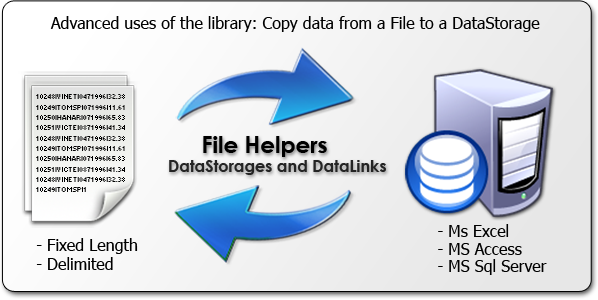
<style>
.page{position:relative;width:598px;height:300px}
.page>*{position:absolute;margin:0}
.t1{font:16.1px "Tahoma";color:#000000}
.t2{font:6.9px/10.3px "Small Fonts";color:#000000}
.t3{font:23px "CenturyGothic-Bold";color:#000000}
.t4{font:16.1px "CenturyGothic-Bold";color:#242424}
.t5{font:16.1px/17.2px "Tahoma";color:#000000}
</style>
<div class="page">
<p class="t1" style="left:50px;top:16px;width:490px;height:16px">Advanced uses of the library: Copy data from a File to a DataStorage</p>
<p class="t2" style="left:36px;top:94px;width:89px;height:98px">10248|VINET|0471996|32.38<br>10249|TOMSP|071996|11.61<br>10250|HANAR|071996|65.83<br>10251|VICTE|0871996|41.34<br>10248|VINET|0471996|32.38<br>10249|TOMSP|071996|11.61<br>10250|HANAR|071996|65.83<br>10251|VICTE|0871996|41.34<br>10248|VINET|0471996|32.38<br>10249|TOMSP|1</p>
<p class="t3" style="left:203px;top:136px;width:124px;height:21px">File Helpers</p>
<p class="t4" style="left:169px;top:160px;width:217px;height:15px">DataStorages and DataLinks</p>
<p class="t5" style="left:438px;top:224px;width:109px;height:51px">- Ms Excel<br>- MS Access<br>- MS Sql Server</p>
<p class="t1" style="left:36px;top:238px;width:102px;height:32px">- Fixed Length<br>- Delimited</p>
</div>
